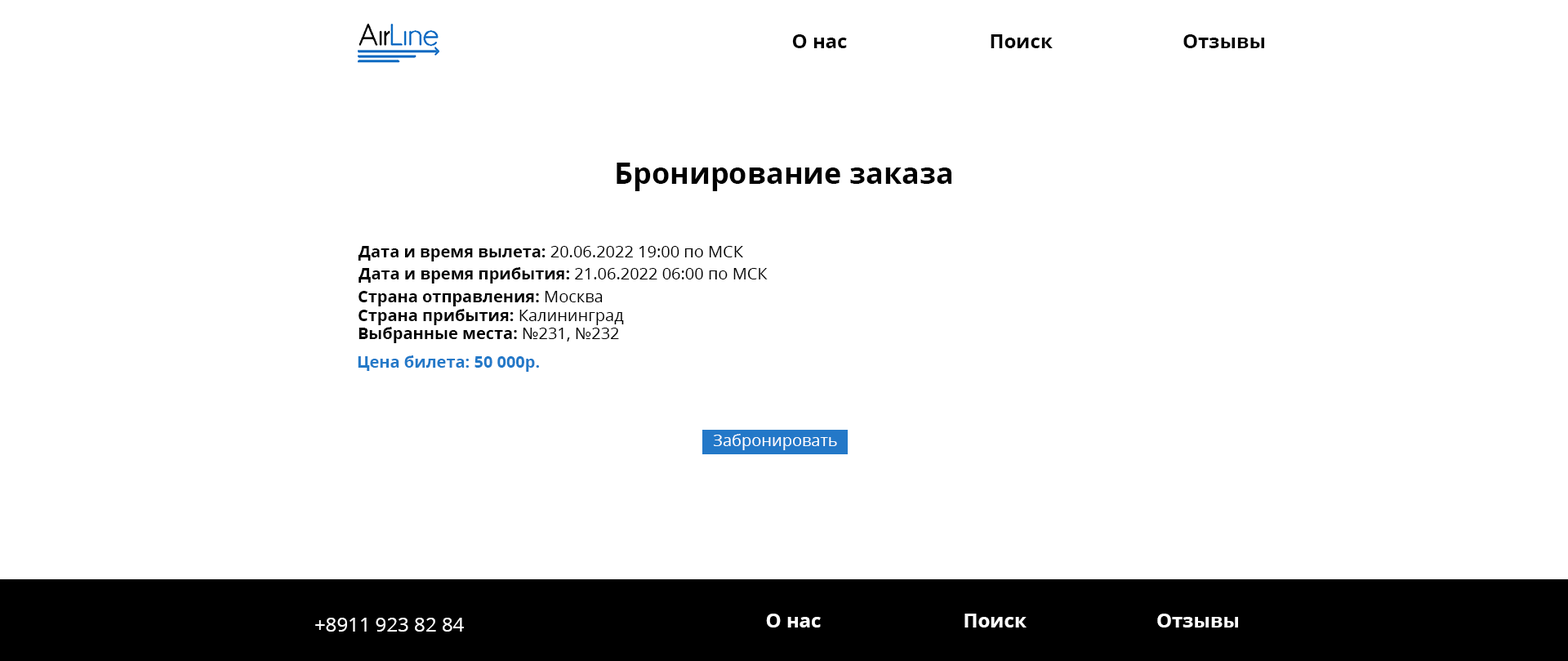
<style>
.page{position:relative;width:1568px;height:661px;background:#ffffff}
.page>*{position:absolute;margin:0}
.t1{font:19.6px "OpenSans-Bold";color:#000000}
.t2{font:29.4px "OpenSans-Bold";color:#000000}
.t3{font:16.3px "OpenSans-Regular";color:#000000}
.t4{font:16.3px "OpenSans-Bold";color:#000000}
.t5{font:16.3px "OpenSans-Bold";color:#2379c8}
.t6{font:16.3px "OpenSans-Regular";color:#ffffff}
.t7{font:19.6px "OpenSans-Regular";color:#ffffff}
.t8{font:19.6px "OpenSans-Bold";color:#ffffff}
</style>
<div class="page">
<p class="t1" style="left:792px;top:34px;width:55px;height:14px">О нас</p>
<p class="t1" style="left:991px;top:34px;width:62px;height:14px">Поиск</p>
<p class="t1" style="left:1183px;top:34px;width:81px;height:14px">Отзывы</p>
<p class="t2" style="left:617px;top:163px;width:334px;height:28px">Бронирование заказа</p>
<p class="t3" style="left:358px;top:246px;width:385px;height:15px"><span class="t4">Дата и время вылета: </span>20.06.2022 19:00 по МСК</p>
<p class="t3" style="left:359px;top:267px;width:409px;height:16px"><span class="t4">Дата и время прибытия: </span>21.06.2022 06:00 по МСК</p>
<p class="t4" style="left:359px;top:291px;width:244px;height:15px">Страна отправления: <span class="t3">Москва</span></p>
<p class="t4" style="left:359px;top:309px;width:265px;height:16px">Страна прибытия: <span class="t3">Калининград</span></p>
<p class="t4" style="left:359px;top:327px;width:260px;height:16px">Выбранные места: <span class="t3">№231, №232</span></p>
<p class="t5" style="left:358px;top:355px;width:181px;height:17px">Цена билета: 50 000р.</p>
<p class="t6" style="left:713px;top:434px;width:124px;height:16px">Забронировать</p>
<p class="t7" style="left:315px;top:617px;width:149px;height:14px">+8911 923 82 84</p>
<p class="t8" style="left:766px;top:613px;width:55px;height:14px">О нас</p>
<p class="t8" style="left:964px;top:613px;width:63px;height:14px">Поиск</p>
<p class="t8" style="left:1157px;top:613px;width:81px;height:14px">Отзывы</p>
</div>
